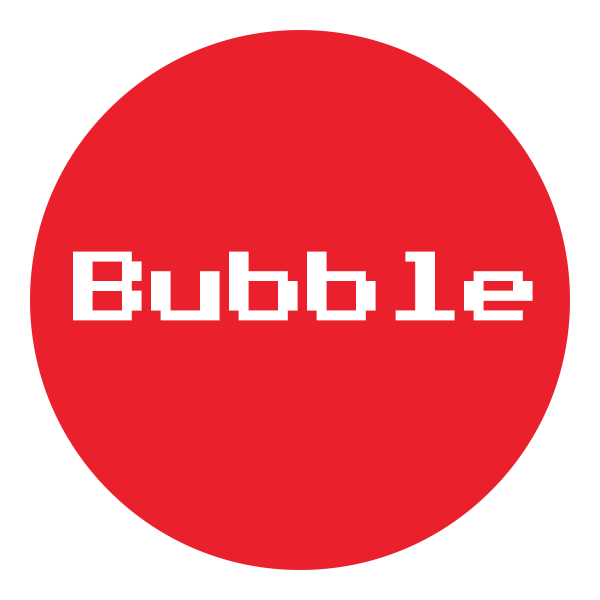
<style>
.page{position:relative;width:600px;height:600px;background:#ea212d}
.page>*{position:absolute;margin:0}
.t1{font:78.2px "PressStart2P-Regular";color:#ffffff}
</style>
<div class="page">
<p class="t1" style="left:73px;top:251px;width:460px;height:70px">Bubble</p>
</div>
